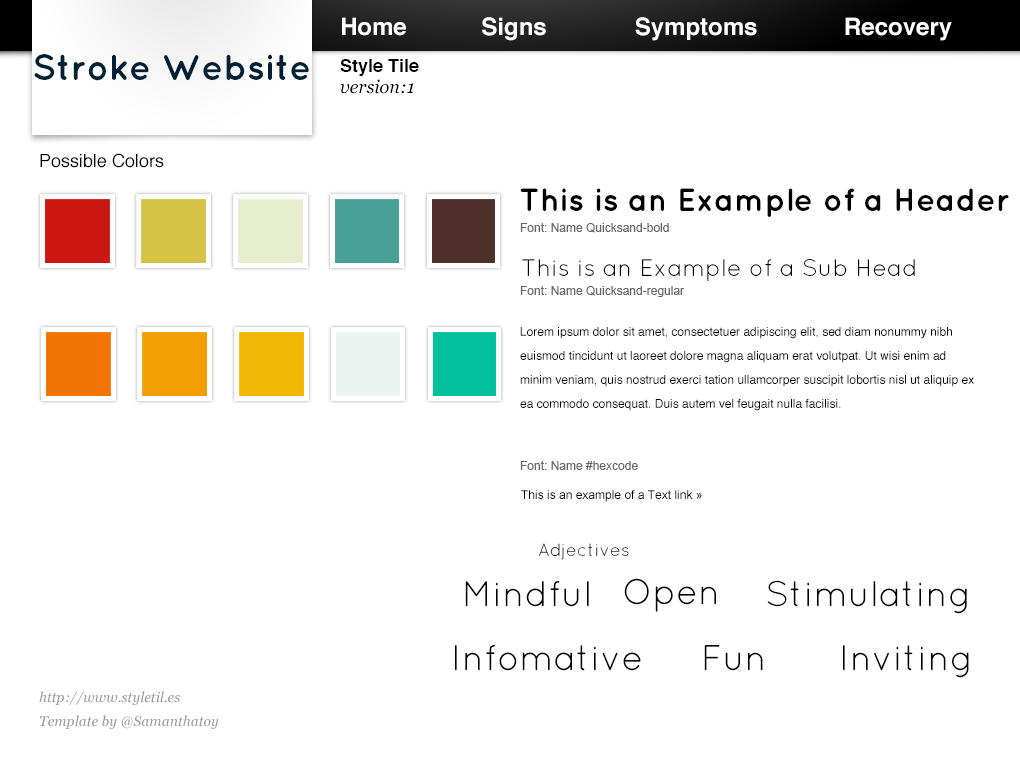
<style>
.page{position:relative;width:1020px;height:760px;background:#ffffff}
.page>*{position:absolute;margin:0}
.t1{font:24px "Helvetica-Bold";color:#ffffff}
.t2{font:36px "Quicksand-Bold";color:#002035}
.t3{font:18px "Helvetica-Bold";color:#000000}
.t4{font:18px "Georgia-Italic";color:#000000}
.t5{font:18px "Helvetica";color:#000000}
.t6{font:32px "Quicksand-Bold";color:#000000}
.t7{font:12px "ArialMT";color:#666666}
.t8{font:24px "Quicksand-Regular";color:#000000}
.t9{font:12px/24px "Helvetica";color:#000000}
.t10{font:12px "ArialMT";color:#000000}
.t11{font:18px "Quicksand-Regular";color:#000000}
.t12{font:36px "Quicksand-Regular";color:#000000}
.t13{font:14px/24px "Georgia-Italic";color:#999999}
</style>
<div class="page">
<p class="t1" style="left:342px;top:17px;width:610px;height:24px">Home       Signs    Symptoms   Recovery</p>
<p class="t2" style="left:34px;top:54px;width:275px;height:27px">Stroke Website</p>
<p class="t3" style="left:340px;top:59px;width:79px;height:17px">Style Tile</p>
<p class="t4" style="left:340px;top:79px;width:74px;height:15px">version:1</p>
<p class="t5" style="left:40px;top:153px;width:124px;height:15px">Possible Colors</p>
<p class="t6" style="left:520px;top:188px;width:489px;height:29px">This is an Example of a Header</p>
<p class="t7" style="left:520px;top:223px;width:149px;height:10px">Font: Name Quicksand-bold</p>
<p class="t8" style="left:522px;top:259px;width:393px;height:22px">This is an Example of a Sub Head</p>
<p class="t7" style="left:520px;top:286px;width:165px;height:11px">Font: Name Quicksand-regular</p>
<p class="t9" style="left:520px;top:327px;width:454px;height:84px">Lorem ipsum dolor sit amet, consectetuer adipiscing elit, sed diam nonummy nibh euismod tincidunt ut laoreet dolore magna aliquam erat volutpat. Ut wisi enim ad minim veniam, quis nostrud exerci tation ullamcorper suscipit lobortis nisl ut aliquip ex ea commodo consequat. Duis autem vel feugait nulla facilisi.</p>
<p class="t7" style="left:520px;top:461px;width:118px;height:9px">Font: Name #hexcode</p>
<p class="t10" style="left:521px;top:490px;width:181px;height:12px">This is an example of a Text link »</p>
<p class="t11" style="left:539px;top:543px;width:90px;height:17px">Adjectives</p>
<p class="t12" style="left:465px;top:581px;width:124px;height:26px">Mindful</p>
<p class="t12" style="left:624px;top:578px;width:92px;height:34px">Open</p>
<p class="t12" style="left:767px;top:580px;width:200px;height:34px">Stimulating</p>
<p class="t12" style="left:455px;top:645px;width:186px;height:26px">Infomative</p>
<p class="t12" style="left:704px;top:645px;width:59px;height:26px">Fun</p>
<p class="t12" style="left:843px;top:645px;width:126px;height:33px">Inviting</p>
<p class="t13" style="left:39px;top:691px;width:180px;height:38px">http://www.styletil.es<br>Template by @Samanthatoy</p>
</div>
